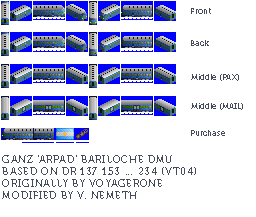
<style>
.page{position:relative;width:256px;height:217px;background:#ffffff}
.page>*{position:absolute;margin:0}
.t1{font:8px "Museo700-Regular";color:#444c5c}
.t2{font:10px "Museo700-Regular";letter-spacing:0.075em;color:#444c5c;text-transform:uppercase}
</style>
<div class="page">
<p class="t1" style="left:191px;top:8px;width:20px;height:6px">Front</p>
<p class="t1" style="left:191px;top:40px;width:18px;height:6px">Back</p>
<p class="t1" style="left:191px;top:74px;width:48px;height:7px">Middle (PAX)</p>
<p class="t1" style="left:191px;top:103px;width:52px;height:7px">Middle (MAIL)</p>
<p class="t1" style="left:191px;top:130px;width:34px;height:6px">Purchase</p>
<p class="t2" style="left:2px;top:155px;width:194px;height:44px">Ganz 'Arpad' Bariloche DMU<br>based on DR 137 153 … 234 (vt04)<br>originally by voyagerone<br>modified by v. nemeth</p>
</div>
